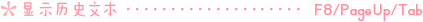
<style>
.page{position:relative;width:423px;height:22px;background:#ffffff}
.page>*{position:absolute;margin:0}
.t1{font:18px "¢è?";color:#ff93a5}
</style>
<div class="page">
<p class="t1" style="left:24px;top:1px;width:93px;height:16px">显示历史文本</p>
</div>
